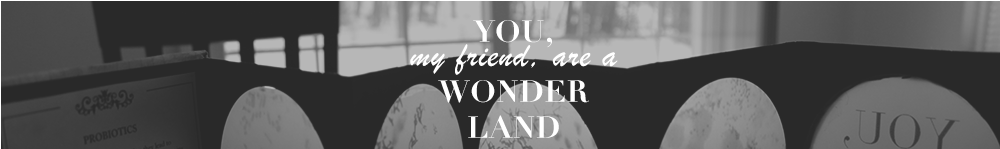
<style>
.page{position:relative;width:1000px;height:149px;background:#292929}
.page>*{position:absolute;margin:0}
.t1{font:36px/24px "BrushScriptMT";letter-spacing:0.025em;color:#ffffff}
.t2{font:30px/24px "Didot-Bold";letter-spacing:0.025em;color:#ffffff}
.t3{font:30px "Didot-Bold";letter-spacing:0.025em;color:#ffffff}
</style>
<div class="page">
<p class="t1" style="left:410px;top:20px;width:208px;height:118px;text-align:center"><span class="t2">YOU,<br></span>my friend, are a<br><span class="t3">WONDER<br>LAND</span></p>
</div>
